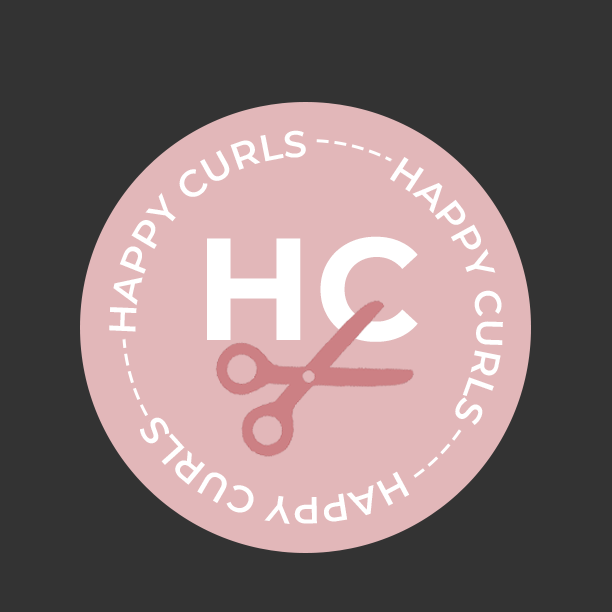
<style>
.page{position:relative;width:612px;height:612px;background:#333333}
.page>*{position:absolute;margin:0}
.t1{font:37.4px/37px "Montserrat-SemiBold";color:#ffffff}
.t2{font:144.9px "Montserrat-Bold";letter-spacing:0.02em;color:#ffffff}
</style>
<div class="page">
<p class="t1" style="left:109px;top:130px;width:394px;height:394px;text-align:center">HAPPY CURLS        HAPPY CURLS        HAPPY CURLS</p>
<p class="t2" style="left:207px;top:236px;width:211px;height:106px">HC</p>
</div>
